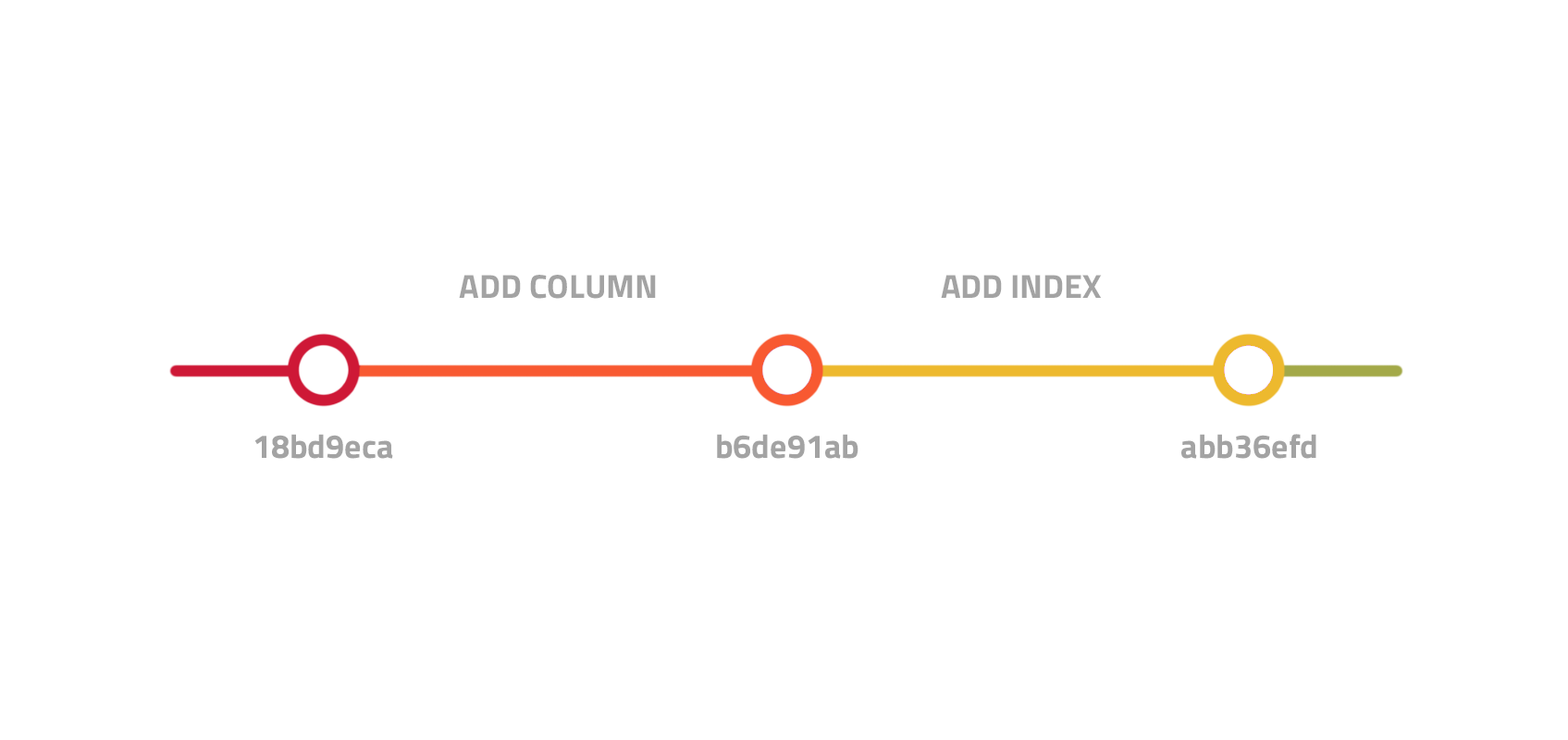
<style>
.page{position:relative;width:1568px;height:740px;background:#ffffff}
.page>*{position:absolute;margin:0}
.t1{font:33.3px "TitilliumWeb-Bold";color:#a3a3a3}
</style>
<div class="page">
<p class="t1" style="left:459px;top:275px;width:197px;height:24px">ADD COLUMN</p>
<p class="t1" style="left:941px;top:275px;width:161px;height:23px">ADD INDEX</p>
<p class="t1" style="left:254px;top:434px;width:139px;height:25px">18bd9eca</p>
<p class="t1" style="left:717px;top:434px;width:141px;height:25px">b6de91ab</p>
<p class="t1" style="left:1181px;top:434px;width:135px;height:25px">abb36efd</p>
</div>
